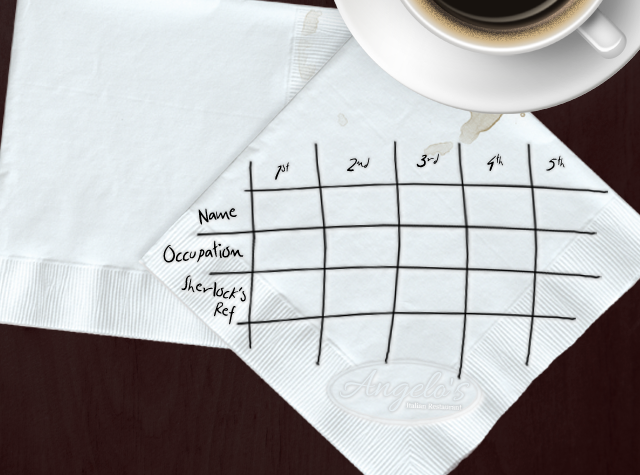
<style>
.page{position:relative;width:640px;height:475px}
.page>*{position:absolute;margin:0}
.t1{font:28.7px "JohnWatson";color:#000000}
.t2{font:25.1px/32.4px "JohnWatson";color:#000000}
.t3{font:25.1px/18.8px "JohnWatson";color:#000000}
</style>
<div class="page">
<p class="t1" style="left:347px;top:157px;width:23px;height:15px;rotate:10deg">2nd</p>
<p class="t1" style="left:416px;top:153px;width:23px;height:15px;rotate:10deg">3rd</p>
<p class="t1" style="left:487px;top:153px;width:16px;height:18px;rotate:10deg">4th</p>
<p class="t1" style="left:546px;top:155px;width:19px;height:16px;rotate:10deg">5th</p>
<p class="t1" style="left:275px;top:162px;width:15px;height:18px;rotate:10deg">1st</p>
<p class="t1" style="left:198px;top:208px;width:39px;height:17px;rotate:-8deg">Name</p>
<p class="t1" style="left:163px;top:240px;width:81px;height:23px;rotate:-4deg">Occupation</p>
<p class="t2" style="left:181px;top:275px;width:65px;height:50px;rotate:11deg">Sherlock's<br>   <span class="t3">Ref</span></p>
</div>
